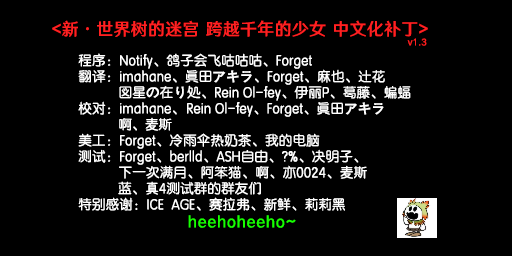
<style>
.page{position:relative;width:512px;height:256px;background:#000000}
.page>*{position:absolute;margin:0}
.t1{font:17.3px "HYWenHei-FEW";letter-spacing:0.025em;color:#ff2021}
.t2{font:9.3px "HYWenHei-FEW";letter-spacing:0.025em;color:#ff2021}
.t3{font:13.3px/16px "FZY3--GB1-4";letter-spacing:0.025em;color:#ffffff}
.t4{font:13.3px/16px "FZY3--GB1-4";color:#ffffff}
.t5{font:16px "HYWenHei-FEW";letter-spacing:0.025em;color:#18ff00}
</style>
<div class="page">
<p class="t1" style="left:52px;top:20px;width:376px;height:17px">&lt;新·世界树的迷宫 跨越千年的少女 中文化补丁&gt;</p>
<p class="t2" style="left:407px;top:38px;width:20px;height:8px">v1.3</p>
<p class="t3" style="left:78px;top:53px;width:333px;height:158px">程序：Notify、鸽子会飞咕咕咕、Forget<br>翻译：imahane、眞田アキラ、Forget、麻也、辻花<br>           図星の在り処、Rein Ol-fey、伊丽P、葛藤、蝙蝠<br>校对：imahane、 Rein Ol-fey、Forget、眞田アキラ<br><span class="t4">            啊、麦斯<br></span>美工：Forget、冷雨伞热奶茶、我的电脑 <br>测试：Forget、berlld、ASH自由、?%、决明子、<br>           下一次满月、阿笨猫、啊、亦0024、麦斯<br>  蓝、真4测试群的群友们<br>特别感谢：ICE  AGE、赛拉弗、新鲜、莉莉黑</p>
<p class="t5" style="left:188px;top:215px;width:108px;height:13px">heehoheeho~</p>
</div>
